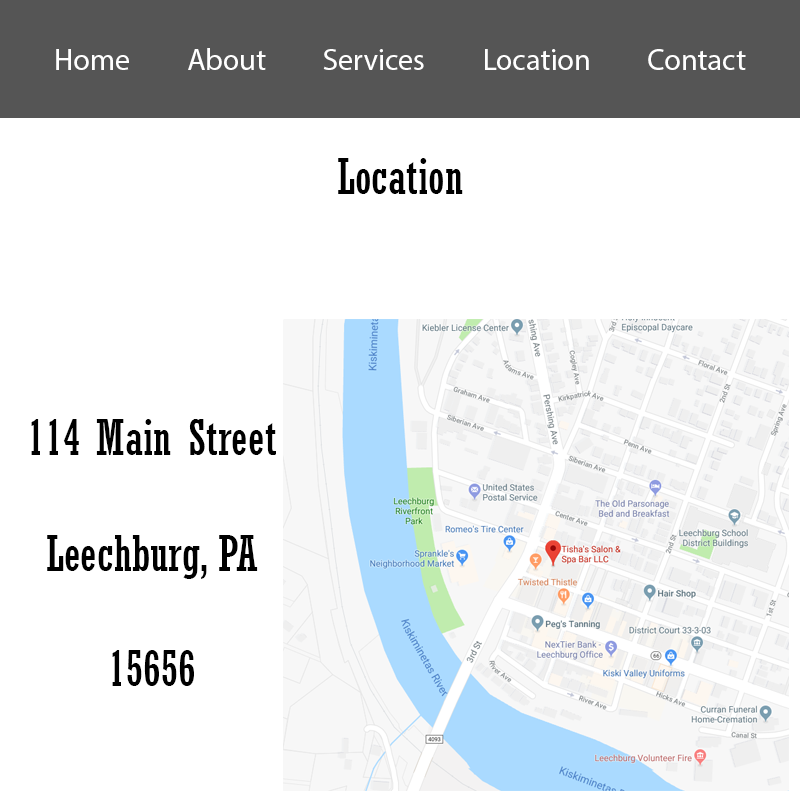
<style>
.page{position:relative;width:800px;height:800px;background:#ffffff}
.page>*{position:absolute;margin:0}
.t1{font:30px "MyriadPro-Regular";color:#ffffff}
.t2{font:48px "Rockwell-Condensed";color:#000000}
</style>
<div class="page">
<p class="t1" style="left:56px;top:48px;width:690px;height:22px">Home         About         Services         Location         Contact</p>
<p class="t2" style="left:338px;top:158px;width:125px;height:36px">Location</p>
<p class="t2" style="left:31px;top:419px;width:245px;height:267px;text-align:center">114 Main Street<br><br>Leechburg, PA<br><br>15656</p>
</div>
